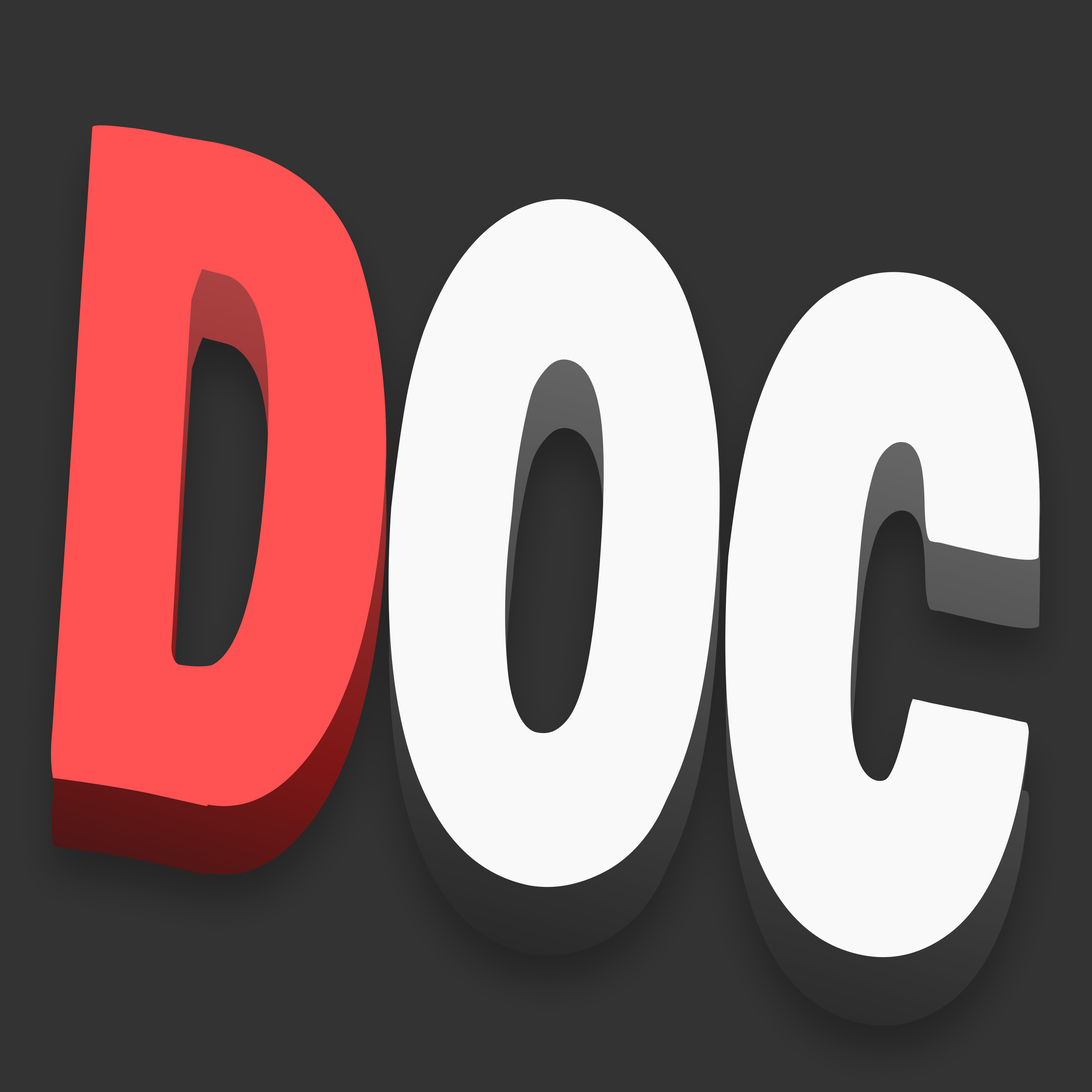
<style>
.page{position:relative;width:1092px;height:1092px;background:#333333}
.page>*{position:absolute;margin:0}
.t1{font:873.9px "BowlbyOne-Regular";color:#f9f9f9;text-transform:uppercase;scale:0.49 1}
.t2{font:873.9px "BowlbyOne-Regular";color:#ff5252;text-transform:uppercase;scale:0.49 1}
</style>
<div class="page">
<p class="t1" style="left:51px;top:125px;width:989px;height:832px;rotate:11deg"><span class="t2">D</span>OC</p>
</div>
